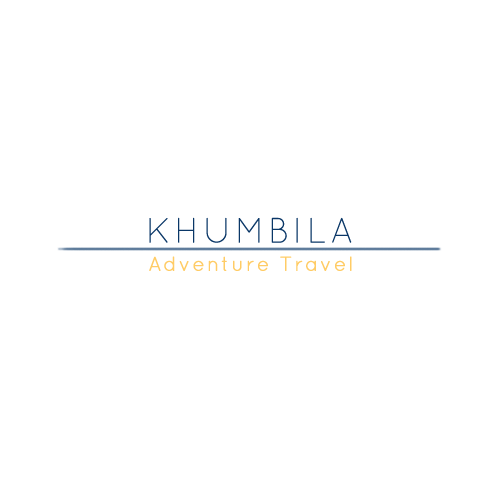
<style>
.page{position:relative;width:500px;height:500px;background:#ffffff}
.page>*{position:absolute;margin:0}
.t1{font:35px "Quicksand-Light";letter-spacing:0.075em;color:#0a3767;font-weight:bold}
.t2{font:20.2px "Quicksand-Regular";letter-spacing:0.075em;color:#ffcc66;font-weight:bold}
</style>
<div class="page">
<p class="t1" style="left:149px;top:217px;width:203px;height:26px">KHUMBILA</p>
<p class="t2" style="left:149px;top:256px;width:203px;height:15px">Adventure Travel</p>
</div>
